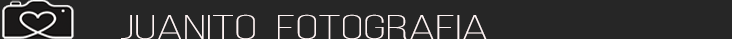
<style>
.page{position:relative;width:732px;height:39px;background:#262626}
.page>*{position:absolute;margin:0}
.t1{font:34px "BebasNeueLight";color:#fff4f4;scale:1.77 1}
</style>
<div class="page">
<p class="t1" style="left:121px;top:14px;width:366px;height:26px">JUANITO  FOTOGRAFIA</p>
</div>
